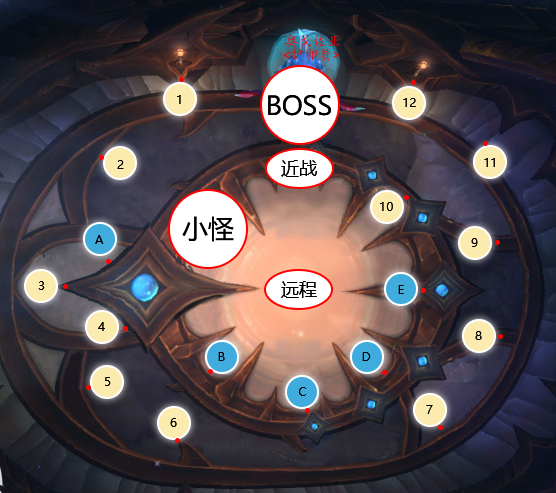
<style>
.page{position:relative;width:556px;height:493px}
.page>*{position:absolute;margin:0}
.t1{font:12px "MicrosoftYaHei";color:#000000}
.t2{font:25.8px "MicrosoftYaHei";color:#000000}
.t3{font:18px "MicrosoftYaHei";color:#000000}
</style>
<div class="page">
<p class="t1" style="left:177px;top:95px;width:4px;height:9px">1</p>
<p class="t2" style="left:268px;top:95px;width:63px;height:21px">BOSS</p>
<p class="t1" style="left:403px;top:98px;width:13px;height:9px">12</p>
<p class="t1" style="left:117px;top:160px;width:7px;height:9px">2</p>
<p class="t3" style="left:281px;top:160px;width:36px;height:17px">近战</p>
<p class="t1" style="left:484px;top:158px;width:11px;height:9px">11</p>
<p class="t1" style="left:380px;top:202px;width:13px;height:9px">10</p>
<p class="t2" style="left:182px;top:216px;width:52px;height:26px">小怪</p>
<p class="t1" style="left:95px;top:235px;width:9px;height:9px">A</p>
<p class="t1" style="left:471px;top:238px;width:7px;height:9px">9</p>
<p class="t1" style="left:38px;top:281px;width:7px;height:9px">3</p>
<p class="t3" style="left:281px;top:281px;width:36px;height:17px">远程</p>
<p class="t1" style="left:398px;top:285px;width:6px;height:9px">E</p>
<p class="t1" style="left:98px;top:322px;width:7px;height:9px">4</p>
<p class="t1" style="left:475px;top:331px;width:7px;height:9px">8</p>
<p class="t1" style="left:218px;top:352px;width:7px;height:9px">B</p>
<p class="t1" style="left:362px;top:352px;width:9px;height:9px">D</p>
<p class="t1" style="left:105px;top:377px;width:6px;height:9px">5</p>
<p class="t1" style="left:299px;top:387px;width:7px;height:9px">C</p>
<p class="t1" style="left:426px;top:405px;width:7px;height:9px">7</p>
<p class="t1" style="left:170px;top:418px;width:7px;height:9px">6</p>
</div>
